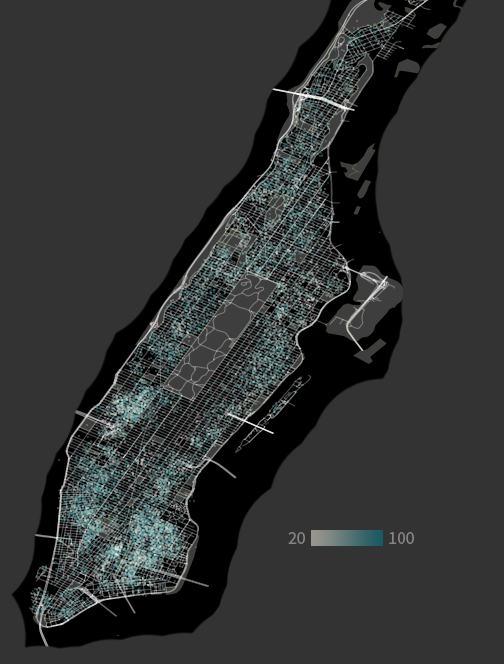
<style>
.page{position:relative;width:504px;height:664px;background:#333333}
.page>*{position:absolute;margin:0}
.t1{font:18px "SourceSansPro-Regular";color:#858585}
</style>
<div class="page">
<p class="t1" style="left:288px;top:532px;width:17px;height:12px">20</p>
<p class="t1" style="left:389px;top:532px;width:25px;height:12px">100</p>
</div>
